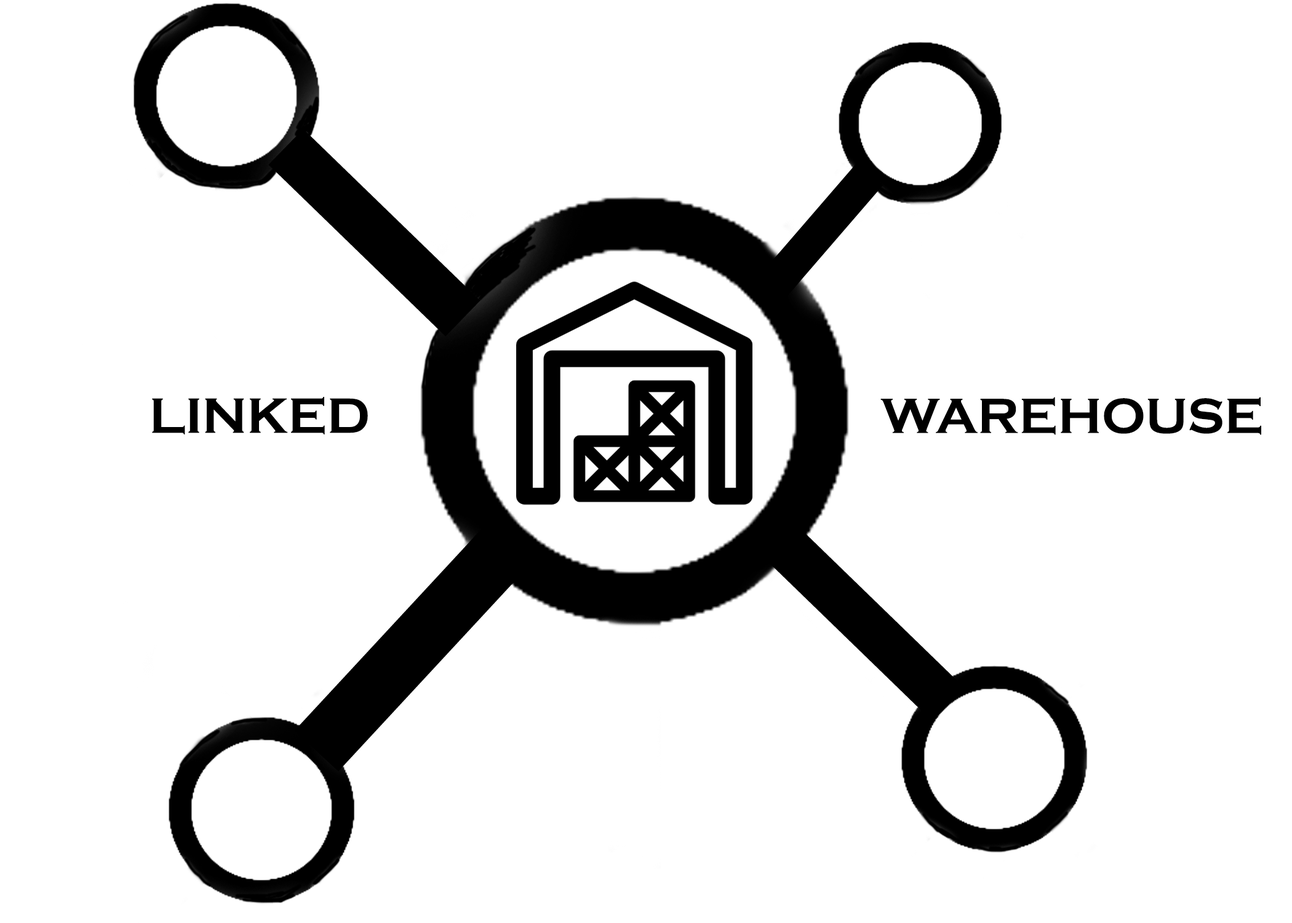
<style>
.page{position:relative;width:1292px;height:923px;background:#ffffff}
.page>*{position:absolute;margin:0}
.t1{font:344.1px "Arial-BoldMT";color:#000000}
.t2{font:237.6px "Arial-BoldMT";color:#000000}
.t3{font:51.3px "CopperplateGothic-Bold";color:#000000}
.t4{font:413.2px "Arial-BoldMT";color:#000000}
.t5{font:320.1px "Arial-BoldMT";color:#000000}
</style>
<div class="page">
<p class="t1" style="left:268px;top:129px;width:213px;height:208px;rotate:-46deg">I</p>
<p class="t2" style="left:746px;top:162px;width:138px;height:152px;rotate:41deg">I</p>
<p class="t3" style="left:152px;top:397px;width:216px;height:37px">LINKED</p>
<p class="t3" style="left:880px;top:397px;width:381px;height:38px">WAREHOUSE</p>
<p class="t4" style="left:294px;top:513px;width:246px;height:259px;rotate:43deg">I</p>
<p class="t5" style="left:767px;top:527px;width:197px;height:194px;rotate:-46deg">I</p>
</div>
